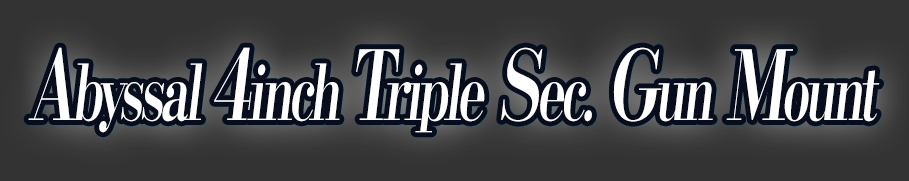
<style>
.page{position:relative;width:909px;height:181px;background:#333333}
.page>*{position:absolute;margin:0}
.t1{font:76.8px "KochoStd-Heavy";letter-spacing:-0.08em;color:#ffffff;font-style:italic;scale:0.67 1}
.t2{font:96px "KochoStd-Heavy";letter-spacing:-0.08em;color:#ffffff;font-style:italic;scale:0.67 1}
</style>
<div class="page">
<p class="t1" style="left:28px;top:47px;width:852px;height:86px"><span class="t2">A</span>byssal <span class="t2">4</span>inch <span class="t2">T</span>riple<span class="t2"> S</span>ec.<span class="t2"> G</span>un<span class="t2"> M</span>ount</p>
</div>
